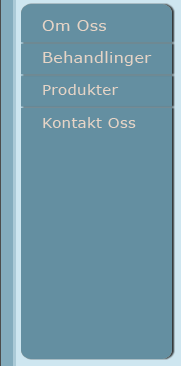
<style>
.page{position:relative;width:181px;height:366px;background:#648fa1}
.page>*{position:absolute;margin:0}
.t1{font:15.1px "Verdana";letter-spacing:0.02em;color:#e6d4c6;scale:1.06 1}
.t2{font:14.1px "Verdana";letter-spacing:0.02em;color:#e6d4c6;scale:1.06 1}
</style>
<div class="page">
<p class="t1" style="left:42px;top:20px;width:64px;height:11px">Om Oss</p>
<p class="t1" style="left:43px;top:51px;width:109px;height:15px">Behandlinger</p>
<p class="t2" style="left:43px;top:84px;width:76px;height:11px">Produkter</p>
<p class="t2" style="left:43px;top:117px;width:93px;height:11px">Kontakt Oss</p>
</div>
